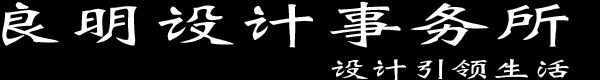
<style>
.page{position:relative;width:600px;height:80px;background:#000000}
.page>*{position:absolute;margin:0}
.t1{font:50px "Weibei-SC-Bold";color:#ffffff;scale:1.7 1}
.t2{font:24px "Weibei-SC-Bold";color:#ffffff;scale:1.7 1}
</style>
<div class="page">
<p class="t1" style="left:2px;top:1px;width:567px;height:47px">良明设计事务所</p>
<p class="t2" style="left:331px;top:59px;width:238px;height:21px">设计引领生活</p>
</div>
